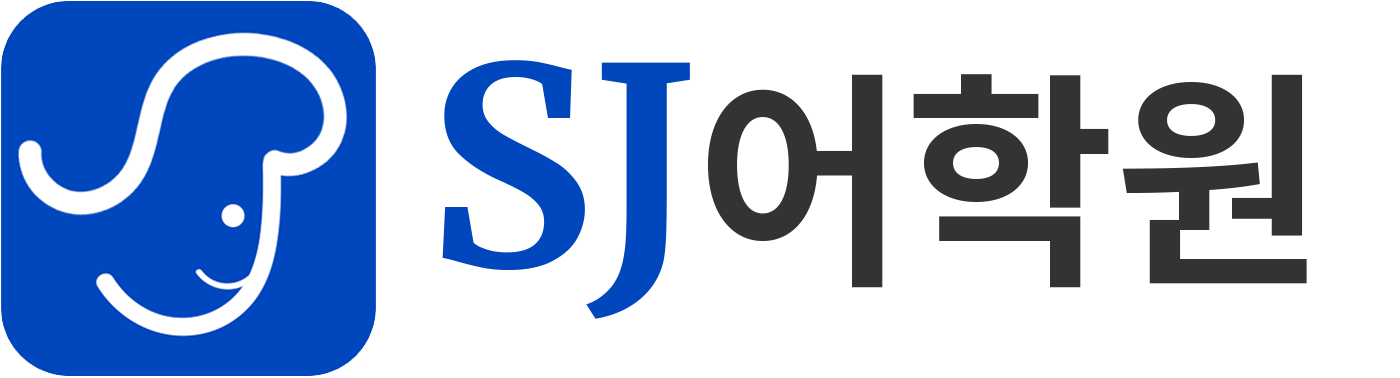
<style>
.page{position:relative;width:1400px;height:378px;background:#ffffff}
.page>*{position:absolute;margin:0}
.t1{font:230px "NotoSansCJKkr-Bold";letter-spacing:-0.01em;color:#333333}
.t2{font:275px "Merriweather-Bold";letter-spacing:-0.01em;color:#0046bd}
</style>
<div class="page">
<p class="t1" style="left:442px;top:60px;width:865px;height:259px"><span class="t2">SJ</span>어학원</p>
</div>
